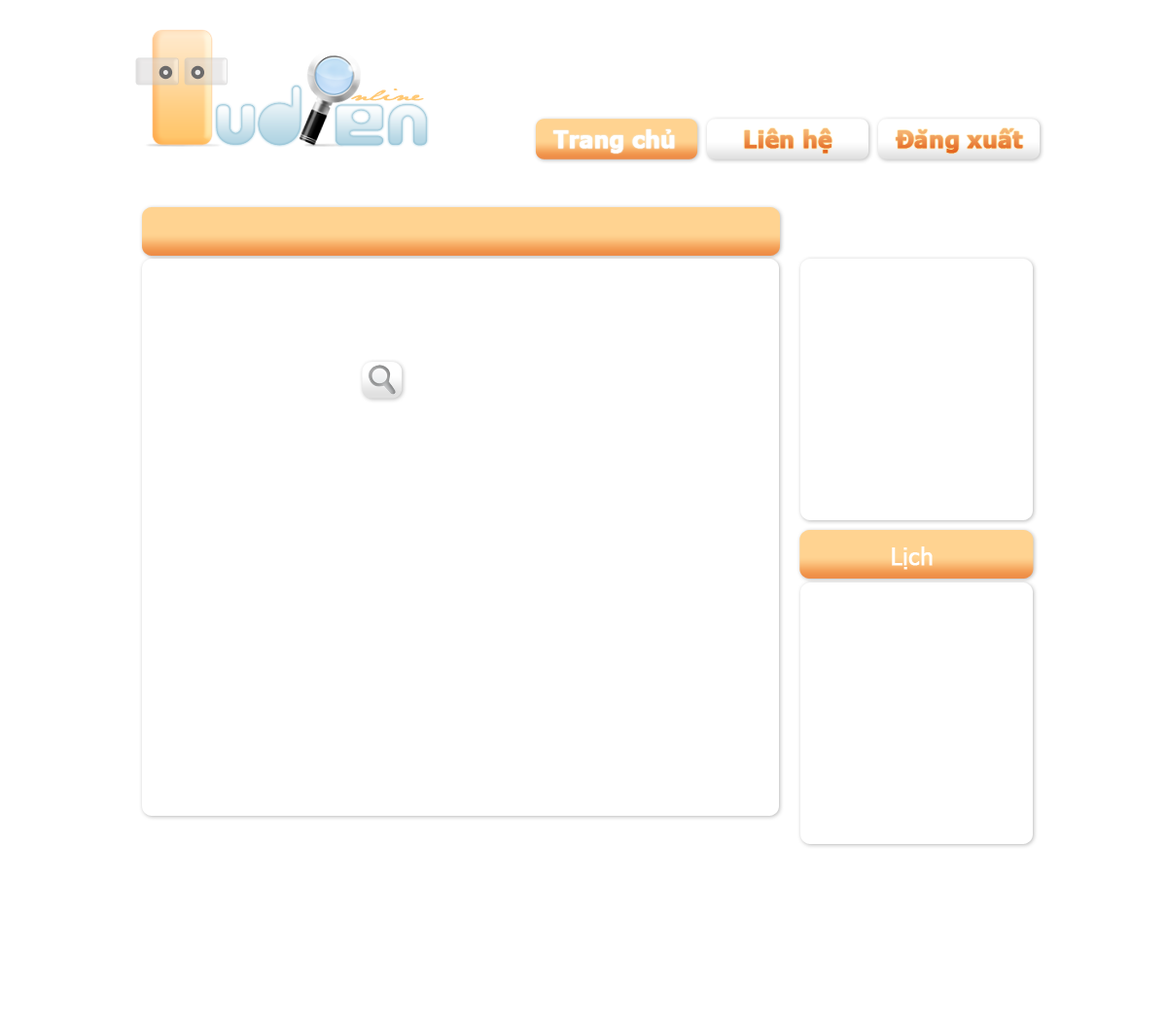
<style>
.page{position:relative;width:1167px;height:1021px;background:#ffffff}
.page>*{position:absolute;margin:0}
.t1{font:23.4px "Tahoma-Bold";color:#ffffff;font-weight:bold}
.t2{font:23.4px "Tahoma-Bold";font-weight:bold}
.t3{font:23.4px "Tahoma";color:#ffffff;font-weight:bold}
</style>
<div class="page">
<p class="t1" style="left:554px;top:129px;width:121px;height:25px">Trang chủ</p>
<p class="t2" style="left:744px;top:128px;width:89px;height:26px">Liên hệ</p>
<p class="t2" style="left:896px;top:128px;width:127px;height:26px">Đăng xuất</p>
<p class="t3" style="left:892px;top:547px;width:41px;height:23px">Lịch</p>
</div>
